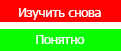
<style>
.page{position:relative;width:121px;height:51px;background:#09ff00}
.page>*{position:absolute;margin:0}
.t1{font:12.5px "Tahoma";color:#ffffff}
</style>
<div class="page">
<p class="t1" style="left:19px;top:8px;width:82px;height:12px">Изучить снова</p>
<p class="t1" style="left:36px;top:35px;width:49px;height:9px">Понятно</p>
</div>
